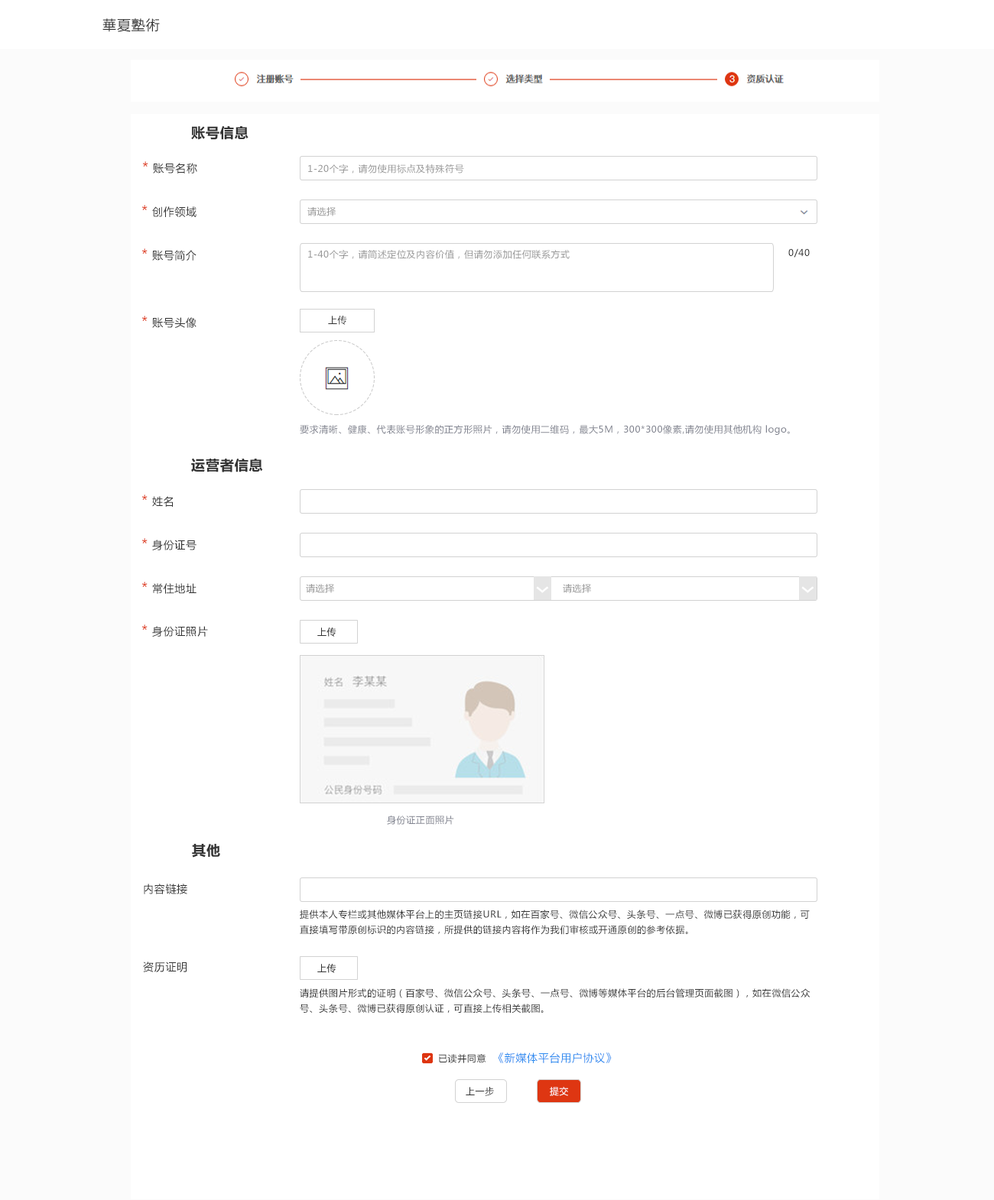
<style>
.page{position:relative;width:994px;height:1200px;background:#ffffff}
.page>*{position:absolute;margin:0}
.t1{font:13.8px "MicrosoftYaHei";letter-spacing:0.05em;color:#333333}
.t2{font:13.8px "MicrosoftYaHei-Bold";letter-spacing:0.05em;color:#333333}
.t3{font:10.7px "MicrosoftYaHei";letter-spacing:0.05em;color:#333333}
.t4{font:13.8px "MicrosoftYaHei";letter-spacing:0.05em;color:#de3612}
.t5{font:9.2px "MicrosoftYaHei";letter-spacing:0.05em;color:#999999}
.t6{font:9.2px "MicrosoftYaHei";letter-spacing:0.05em;color:#333333}
.t7{font:9.2px "MicrosoftYaHei";letter-spacing:0.05em;color:#818490}
.t8{font:13.8px "MicrosoftYaHei-Bold";letter-spacing:0.05em;color:#ffffff}
.t9{font:9.2px/15.3px "MicrosoftYaHei";letter-spacing:0.05em;color:#333333}
.t10{font:10.7px "MicrosoftYaHei";letter-spacing:0.05em;color:#2d8cf0}
.t11{font:9.2px "MicrosoftYaHei";letter-spacing:0.05em;color:#ffffff}
</style>
<div class="page">
<p class="t1" style="left:102px;top:18px;width:58px;height:14px">華夏塾術</p>
<p class="t2" style="left:191px;top:126px;width:57px;height:14px">账号信息</p>
<p class="t3" style="left:142px;top:161px;width:55px;height:13px"><span class="t4">*</span> 账号名称</p>
<p class="t5" style="left:308px;top:164px;width:156px;height:10px">1-20个字，请勿使用标点及特殊符号</p>
<p class="t3" style="left:141px;top:205px;width:55px;height:12px"><span class="t4">*</span> 创作领域</p>
<p class="t5" style="left:307px;top:207px;width:29px;height:9px">请选择</p>
<p class="t3" style="left:141px;top:248px;width:55px;height:13px"><span class="t4">*</span> 账号简介</p>
<p class="t5" style="left:308px;top:249px;width:261px;height:10px">1-40个字，请简述定位及内容价值，但请勿添加任何联系方式</p>
<p class="t6" style="left:788px;top:248px;width:21px;height:10px">0/40</p>
<p class="t3" style="left:141px;top:316px;width:55px;height:12px"><span class="t4">*</span> 账号头像</p>
<p class="t6" style="left:328px;top:316px;width:19px;height:9px">上传</p>
<p class="t7" style="left:300px;top:424px;width:490px;height:11px">要求清晰、健康、代表账号形象的正方形照片，请勿使用二维码，最大5M，300*300像素,请勿使用其他机构 logo。</p>
<p class="t2" style="left:191px;top:458px;width:72px;height:14px">运营者信息</p>
<p class="t3" style="left:141px;top:495px;width:32px;height:12px"><span class="t4">*</span> 姓名</p>
<p class="t3" style="left:141px;top:538px;width:55px;height:12px"><span class="t4">*</span> 身份证号</p>
<p class="t3" style="left:141px;top:582px;width:55px;height:12px"><span class="t4">*</span> 常住地址</p>
<p class="t5" style="left:306px;top:584px;width:28px;height:9px">请选择</p>
<p class="t8" style="left:536px;top:586px;width:13px;height:7px;rotate:-90deg">ㄑ</p>
<p class="t5" style="left:563px;top:584px;width:28px;height:9px">请选择</p>
<p class="t8" style="left:801px;top:586px;width:13px;height:7px;rotate:-90deg">ㄑ</p>
<p class="t3" style="left:141px;top:624px;width:67px;height:13px"><span class="t4">*</span> 身份证照片</p>
<p class="t7" style="left:387px;top:816px;width:67px;height:9px">身份证正面照片</p>
<p class="t2" style="left:192px;top:844px;width:28px;height:14px">其他</p>
<p class="t3" style="left:144px;top:884px;width:43px;height:10px">内容链接</p>
<p class="t9" style="left:300px;top:910px;width:509px;height:25px">提供本人专栏或其他媒体平台上的主页链接URL，如在百家号、微信公众号、头条号、一点号、微博已获得原创功能，可直接填写带原创标识的内容链接，所提供的链接内容将作为我们审核或开通原创的参考依据。</p>
<p class="t3" style="left:143px;top:962px;width:44px;height:10px">资历证明</p>
<p class="t9" style="left:300px;top:988px;width:510px;height:26px">请提供图片形式的证明（百家号、微信公众号、头条号、一点号、微博等媒体平台的后台管理页面截图），如在微信公众号、头条号、微博已获得原创认证，可直接上传相关截图。</p>
<p class="t6" style="left:439px;top:1054px;width:47px;height:9px">已读并同意</p>
<p class="t10" style="left:498px;top:1053px;width:113px;height:10px">《新媒体平台用户协议》</p>
<p class="t6" style="left:465px;top:1087px;width:29px;height:9px">上一步</p>
<p class="t11" style="left:550px;top:1087px;width:18px;height:9px">提交</p>
</div>
